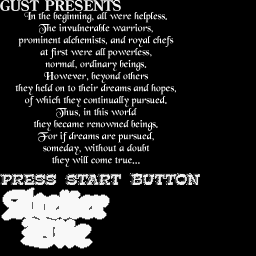
<style>
.page{position:relative;width:256px;height:256px;background:#000000}
.page>*{position:absolute;margin:0}
.t1{font:11px/12px "BlackChancery";color:#ffffff}
</style>
<div class="page">
<p class="t1" style="left:15px;top:12px;width:161px;height:155px;text-align:center">In the beginning, all were helpless.<br>The invulnerable warriors,<br>prominent alchemists, and royal chefs<br>at first were all powerless,<br>normal, ordinary beings.<br>However, beyond others<br>they held on to their dreams and hopes,<br>of which they continually pursued.<br>Thus, in this world<br>they became renowned beings.<br>For if dreams are pursued,<br>someday, without a doubt<br>they will come true...</p>
</div>
